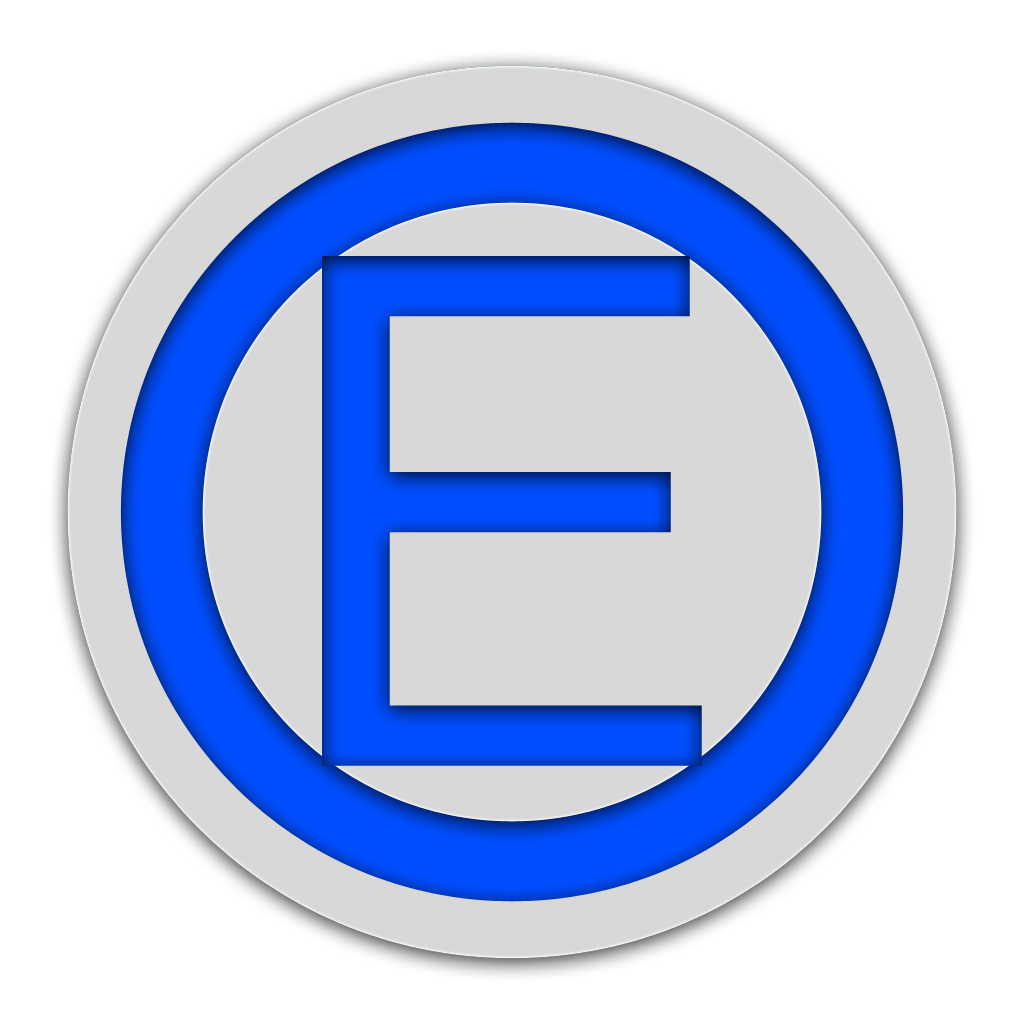
<style>
.page{position:relative;width:1024px;height:1024px;background:#ffffff}
.page>*{position:absolute;margin:0}
.t1{font:711.1px "ArialMT"}
</style>
<div class="page">
<p class="t1" style="left:322px;top:256px;width:380px;height:510px">E</p>
</div>
